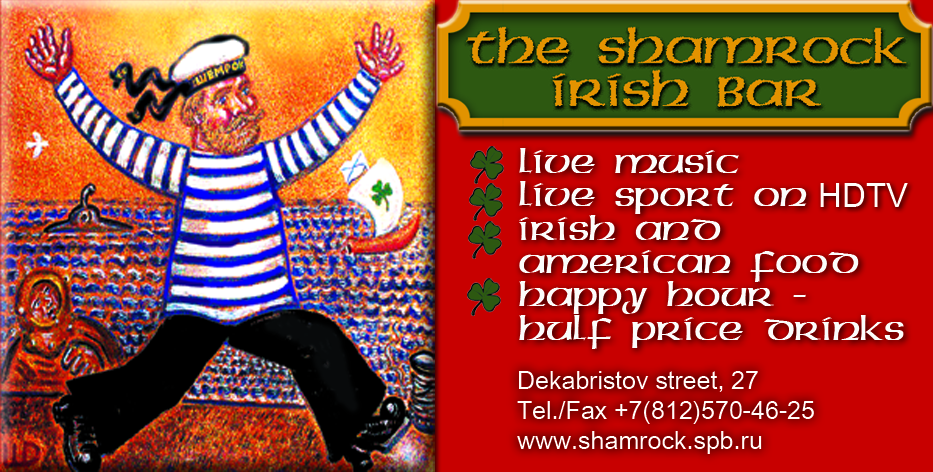
<style>
.page{position:relative;width:933px;height:472px}
.page>*{position:absolute;margin:0}
.t1{font:25px/33.3px "MegenPlain";color:#fbfcfb}
.t2{font:33.3px "ArialUnicodeMS";color:#fffdfa}
.t3{font:25px "ArialUnicodeMS";color:#fffdfa}
</style>
<div class="page">
<p class="t1" style="left:519px;top:148px;width:385px;height:201px">live music<br>Live sport on <br>irish and <br>american food<br>happy hour - <br>hulf price drinks</p>
<p class="t2" style="left:820px;top:183px;width:88px;height:24px">HDTV</p>
<p class="t3" style="left:517px;top:371px;width:297px;height:83px">Dekabristov street, 27<br>Tel./Fax +7(812)570-46-25<br>www.shamrock.spb.ru</p>
</div>
